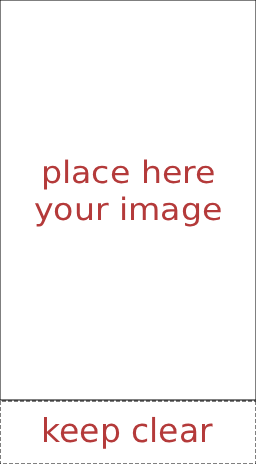
<style>
.page{position:relative;width:256px;height:464px;background:#ffffff}
.page>*{position:absolute;margin:0}
.t1{font:30.8px "DejaVuSans";color:#b43a3a;scale:1.08 1}
.t2{font:33px "DejaVuSans";color:#b43a3a}
</style>
<div class="page">
<p class="t1" style="left:34px;top:159px;width:187px;height:68px;text-align:center">place here<br>your image</p>
<p class="t2" style="left:43px;top:416px;width:170px;height:33px">keep clear</p>
</div>
